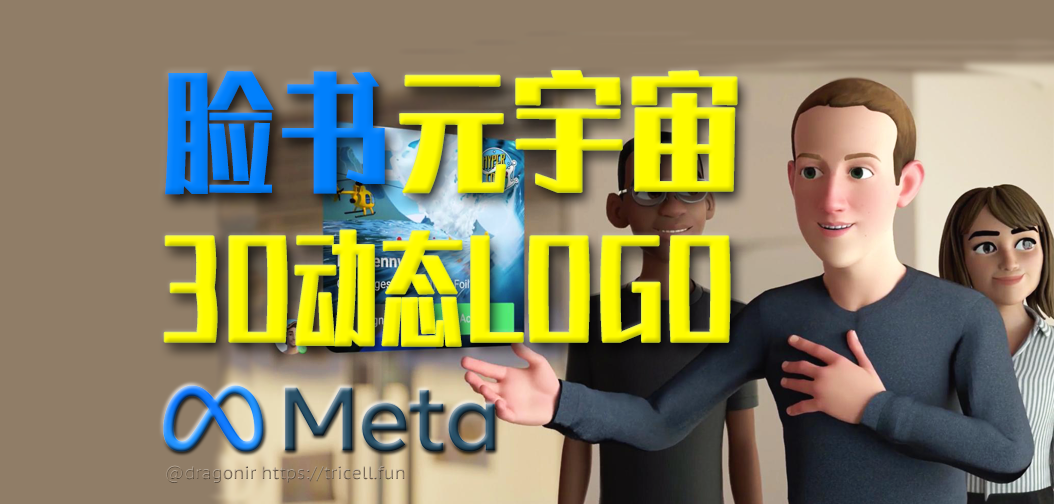
<style>
.page{position:relative;width:1054px;height:504px;background:#907d67}
.page>*{position:absolute;margin:0}
.t1{font:132.6px "AliHYAiHei";color:#0180fc;scale:0.88 1}
.t2{font:131px "AliHYAiHei";color:#fffc00;scale:0.89 1}
.t3{font:124.8px "AliHYAiHei";color:#fffc00;scale:0.69 1}
.t4{font:18px "PTSans-Caption";scale:0.95 1}
</style>
<div class="page">
<p class="t1" style="left:165px;top:71px;width:220px;height:124px">脸书</p>
<p class="t2" style="left:400px;top:71px;width:337px;height:122px">元宇宙</p>
<p class="t3" style="left:164px;top:230px;width:566px;height:116px">3D动态LOGO</p>
<p class="t4" style="left:166px;top:465px;width:239px;height:18px">@dragonir https://tricell.fun</p>
</div>
